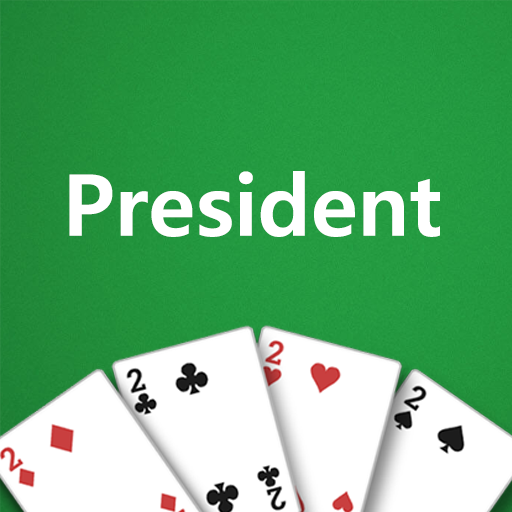
<style>
.page{position:relative;width:512px;height:512px;background:#ffffff}
.page>*{position:absolute;margin:0}
.t1{font:85px "MalgunGothicBold";color:#ffffff}
</style>
<div class="page">
<p class="t1" style="left:69px;top:171px;width:371px;height:66px">President</p>
</div>
